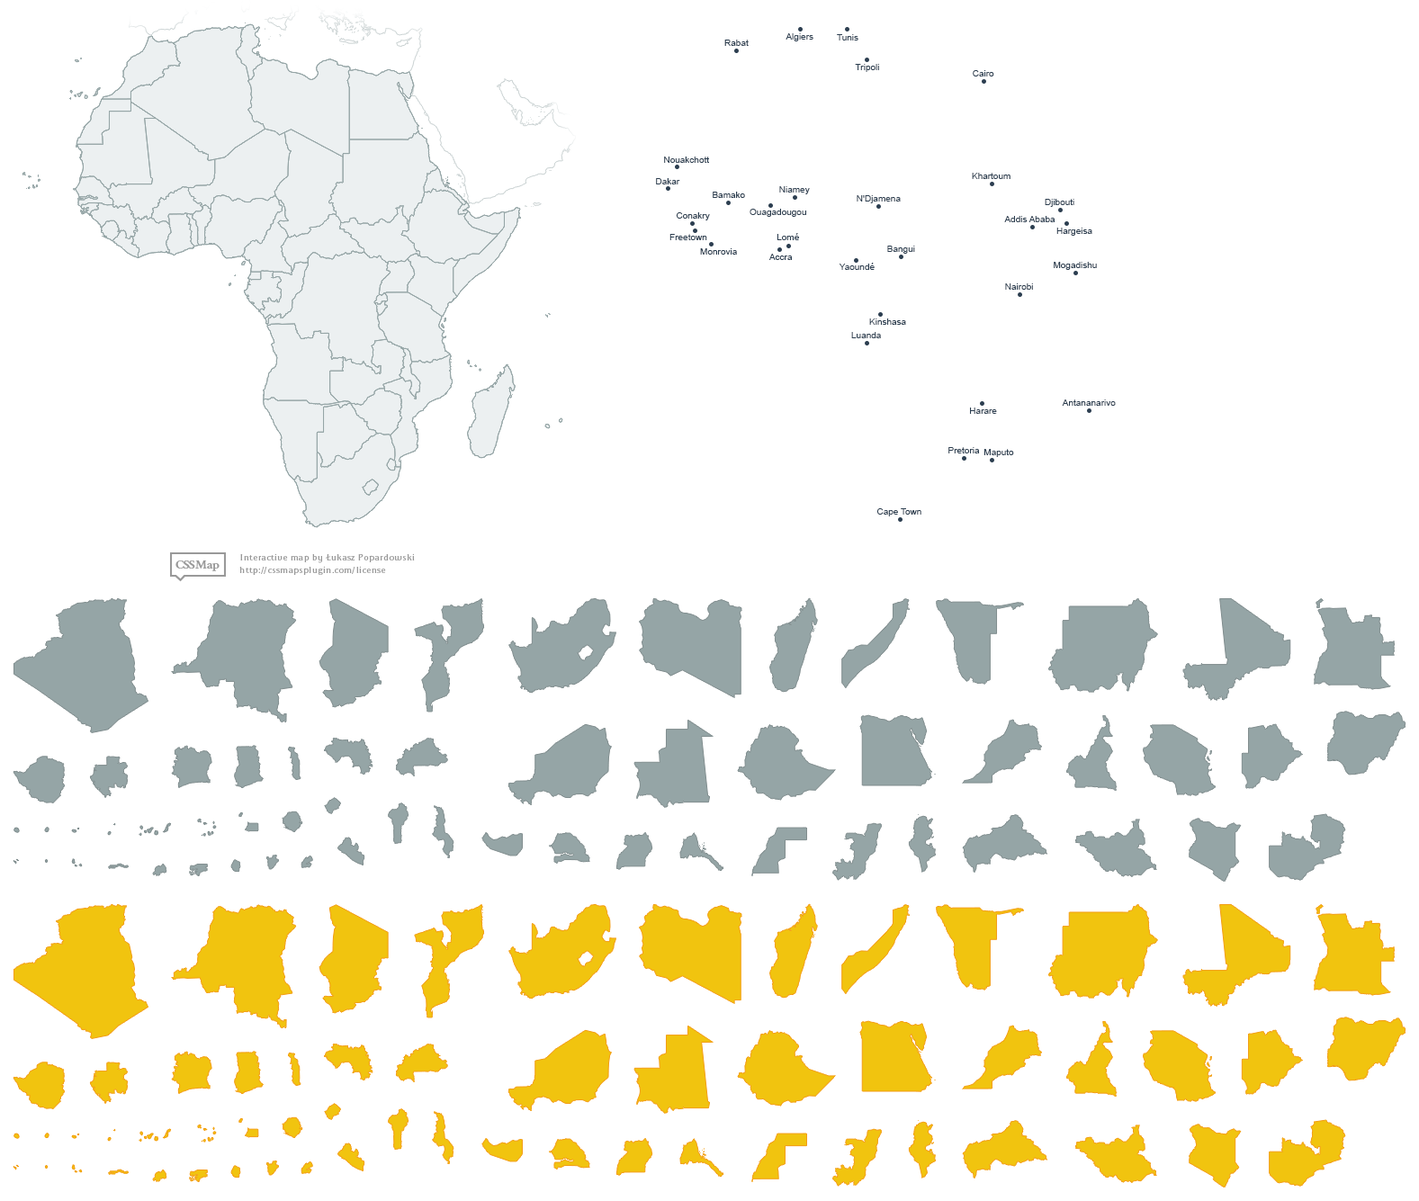
<style>
.page{position:relative;width:1419px;height:1201px;background:#ffffff}
.page>*{position:absolute;margin:0}
.t1{font:9px "ArialMT";color:#2c3e50}
</style>
<div class="page">
<p class="t1" style="left:724px;top:40px;width:25px;height:6px">Rabat</p>
<p class="t1" style="left:786px;top:33px;width:28px;height:8px">Algiers</p>
<p class="t1" style="left:837px;top:34px;width:22px;height:6px">Tunis</p>
<p class="t1" style="left:855px;top:64px;width:24px;height:8px">Tripoli</p>
<p class="t1" style="left:973px;top:70px;width:21px;height:6px">Cairo</p>
<p class="t1" style="left:664px;top:157px;width:45px;height:6px">Nouakchott</p>
<p class="t1" style="left:972px;top:173px;width:39px;height:6px">Khartoum</p>
<p class="t1" style="left:656px;top:178px;width:24px;height:6px">Dakar</p>
<p class="t1" style="left:713px;top:192px;width:32px;height:6px">Bamako</p>
<p class="t1" style="left:779px;top:186px;width:31px;height:8px">Niamey</p>
<p class="t1" style="left:857px;top:195px;width:44px;height:8px">N'Djamena</p>
<p class="t1" style="left:750px;top:209px;width:56px;height:8px">Ouagadougou</p>
<p class="t1" style="left:1045px;top:199px;width:30px;height:8px">Djibouti</p>
<p class="t1" style="left:676px;top:212px;width:34px;height:8px">Conakry</p>
<p class="t1" style="left:1004px;top:216px;width:52px;height:6px">Addis Ababa</p>
<p class="t1" style="left:670px;top:234px;width:37px;height:6px">Freetown</p>
<p class="t1" style="left:777px;top:233px;width:22px;height:7px">Lomé</p>
<p class="t1" style="left:1057px;top:228px;width:36px;height:8px">Hargeisa</p>
<p class="t1" style="left:887px;top:246px;width:28px;height:8px">Bangui</p>
<p class="t1" style="left:700px;top:248px;width:37px;height:7px">Monrovia</p>
<p class="t1" style="left:769px;top:254px;width:24px;height:6px">Accra</p>
<p class="t1" style="left:839px;top:263px;width:36px;height:7px">Yaoundé</p>
<p class="t1" style="left:1054px;top:262px;width:43px;height:8px">Mogadishu</p>
<p class="t1" style="left:1005px;top:283px;width:28px;height:7px">Nairobi</p>
<p class="t1" style="left:869px;top:319px;width:37px;height:6px">Kinshasa</p>
<p class="t1" style="left:851px;top:332px;width:30px;height:6px">Luanda</p>
<p class="t1" style="left:1062px;top:400px;width:54px;height:6px">Antananarivo</p>
<p class="t1" style="left:970px;top:408px;width:27px;height:6px">Harare</p>
<p class="t1" style="left:949px;top:447px;width:31px;height:7px">Pretoria</p>
<p class="t1" style="left:984px;top:449px;width:30px;height:8px">Maputo</p>
<p class="t1" style="left:877px;top:508px;width:45px;height:9px">Cape Town</p>
</div>
